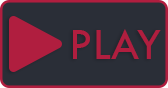
<style>
.page{position:relative;width:168px;height:88px;background:#2a2e37}
.page>*{position:absolute;margin:0}
.t1{font:47.1px "TwCenMT-Regular";color:#b01e3f}
</style>
<div class="page">
<p class="t1" style="left:73px;top:29px;width:88px;height:30px">PLAY</p>
</div>
